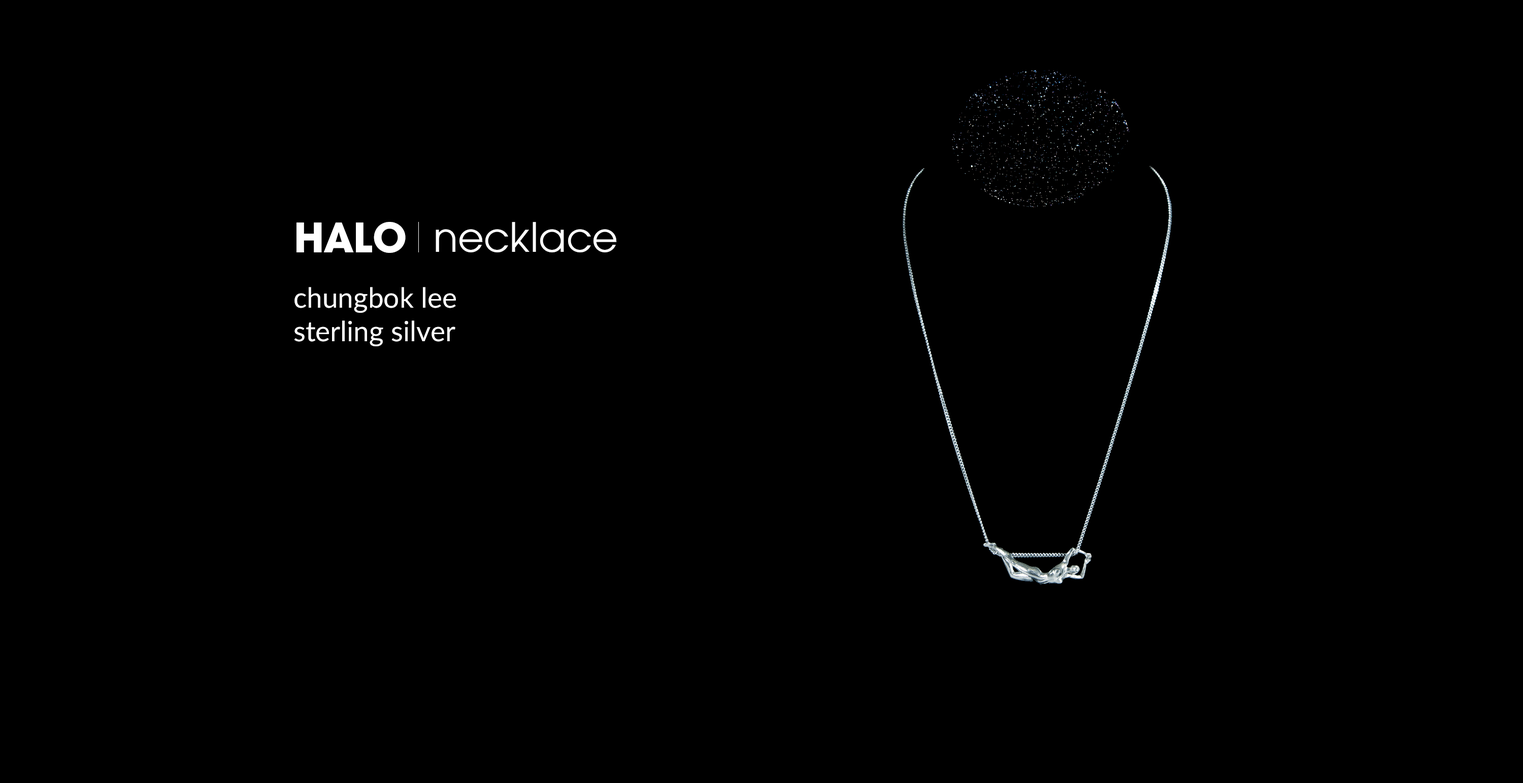
<style>
.page{position:relative;width:1523px;height:783px;background:#000000}
.page>*{position:absolute;margin:0}
.t1{font:44.7px "AvantGardEF-Bold";color:#ffffff}
.t2{font:44.7px "AvantGardEF-Book";color:#ffffff}
.t3{font:27.9px/33.5px "Lato-Regular";color:#ffffff}
</style>
<div class="page">
<p class="t1" style="left:297px;top:222px;width:109px;height:31px">HALO</p>
<p class="t2" style="left:436px;top:222px;width:181px;height:30px">necklace</p>
<p class="t3" style="left:294px;top:287px;width:162px;height:59px">chungbok lee<br>sterling silver</p>
</div>
